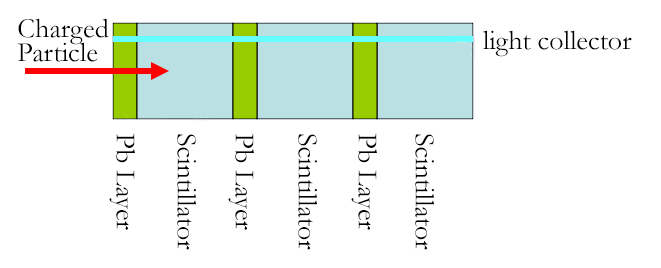
<style>
.page{position:relative;width:661px;height:268px;background:#ffffff}
.page>*{position:absolute;margin:0}
.t1{font:28px/24px "Garamond";color:#000000}
.t2{font:28px "Garamond";color:#000000}
</style>
<div class="page">
<p class="t1" style="left:17px;top:18px;width:92px;height:44px">Charged <br>Particle</p>
<p class="t2" style="left:483px;top:30px;width:149px;height:27px">light collector</p>
<p class="t2" style="left:109px;top:133px;width:26px;height:97px;rotate:90deg">Pb Layer</p>
<p class="t2" style="left:177px;top:134px;width:19px;height:116px;rotate:90deg">Scintillator</p>
<p class="t2" style="left:228px;top:133px;width:26px;height:97px;rotate:90deg">Pb Layer</p>
<p class="t2" style="left:298px;top:134px;width:19px;height:116px;rotate:90deg">Scintillator</p>
<p class="t2" style="left:351px;top:133px;width:26px;height:97px;rotate:90deg">Pb Layer</p>
<p class="t2" style="left:415px;top:134px;width:19px;height:116px;rotate:90deg">Scintillator</p>
</div>
